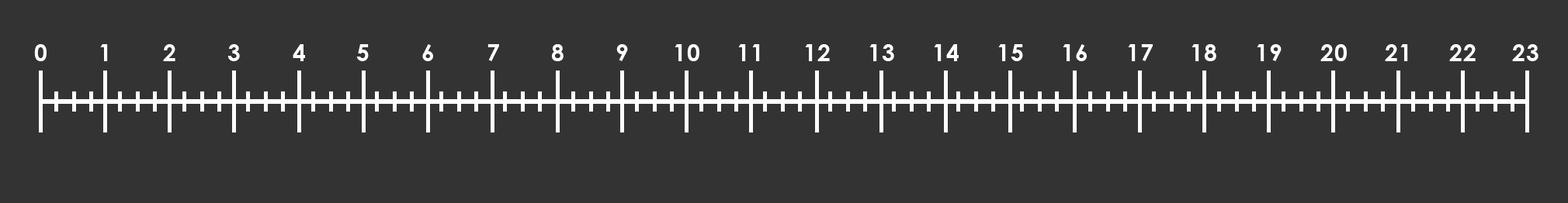
<style>
.page{position:relative;width:1568px;height:203px;background:#333333}
.page>*{position:absolute;margin:0}
.t1{font:23.3px "CenturyGothic-Bold";letter-spacing:0.04em;color:#ffffff}
</style>
<div class="page">
<p class="t1" style="left:34px;top:44px;width:13px;height:17px">0</p>
<p class="t1" style="left:100px;top:44px;width:8px;height:17px">1</p>
<p class="t1" style="left:163px;top:44px;width:12px;height:17px">2</p>
<p class="t1" style="left:227px;top:44px;width:13px;height:17px">3</p>
<p class="t1" style="left:293px;top:44px;width:12px;height:17px">4</p>
<p class="t1" style="left:356px;top:44px;width:13px;height:17px">5</p>
<p class="t1" style="left:422px;top:44px;width:11px;height:17px">6</p>
<p class="t1" style="left:487px;top:44px;width:12px;height:17px">7</p>
<p class="t1" style="left:551px;top:44px;width:13px;height:17px">8</p>
<p class="t1" style="left:616px;top:44px;width:12px;height:17px">9</p>
<p class="t1" style="left:675px;top:44px;width:24px;height:17px">10</p>
<p class="t1" style="left:738px;top:44px;width:22px;height:17px">11</p>
<p class="t1" style="left:805px;top:44px;width:25px;height:17px">12</p>
<p class="t1" style="left:869px;top:44px;width:25px;height:17px">13</p>
<p class="t1" style="left:934px;top:44px;width:25px;height:17px">14</p>
<p class="t1" style="left:998px;top:44px;width:25px;height:17px">15</p>
<p class="t1" style="left:1063px;top:44px;width:24px;height:17px">16</p>
<p class="t1" style="left:1128px;top:44px;width:25px;height:17px">17</p>
<p class="t1" style="left:1192px;top:44px;width:24px;height:17px">18</p>
<p class="t1" style="left:1257px;top:44px;width:25px;height:17px">19</p>
<p class="t1" style="left:1320px;top:44px;width:27px;height:17px">20</p>
<p class="t1" style="left:1385px;top:44px;width:23px;height:17px">21</p>
<p class="t1" style="left:1449px;top:44px;width:27px;height:17px">22</p>
<p class="t1" style="left:1512px;top:44px;width:27px;height:17px">23</p>
</div>
